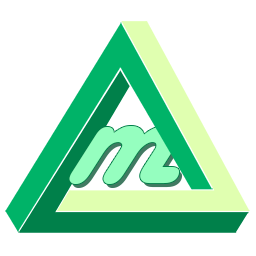
<style>
.page{position:relative;width:256px;height:256px;background:#ffffff}
.page>*{position:absolute;margin:0}
.t1{font:155px "HarlowSolid";color:#95febf}
</style>
<div class="page">
<p class="t1" style="left:69px;top:126px;width:111px;height:58px">m</p>
</div>
